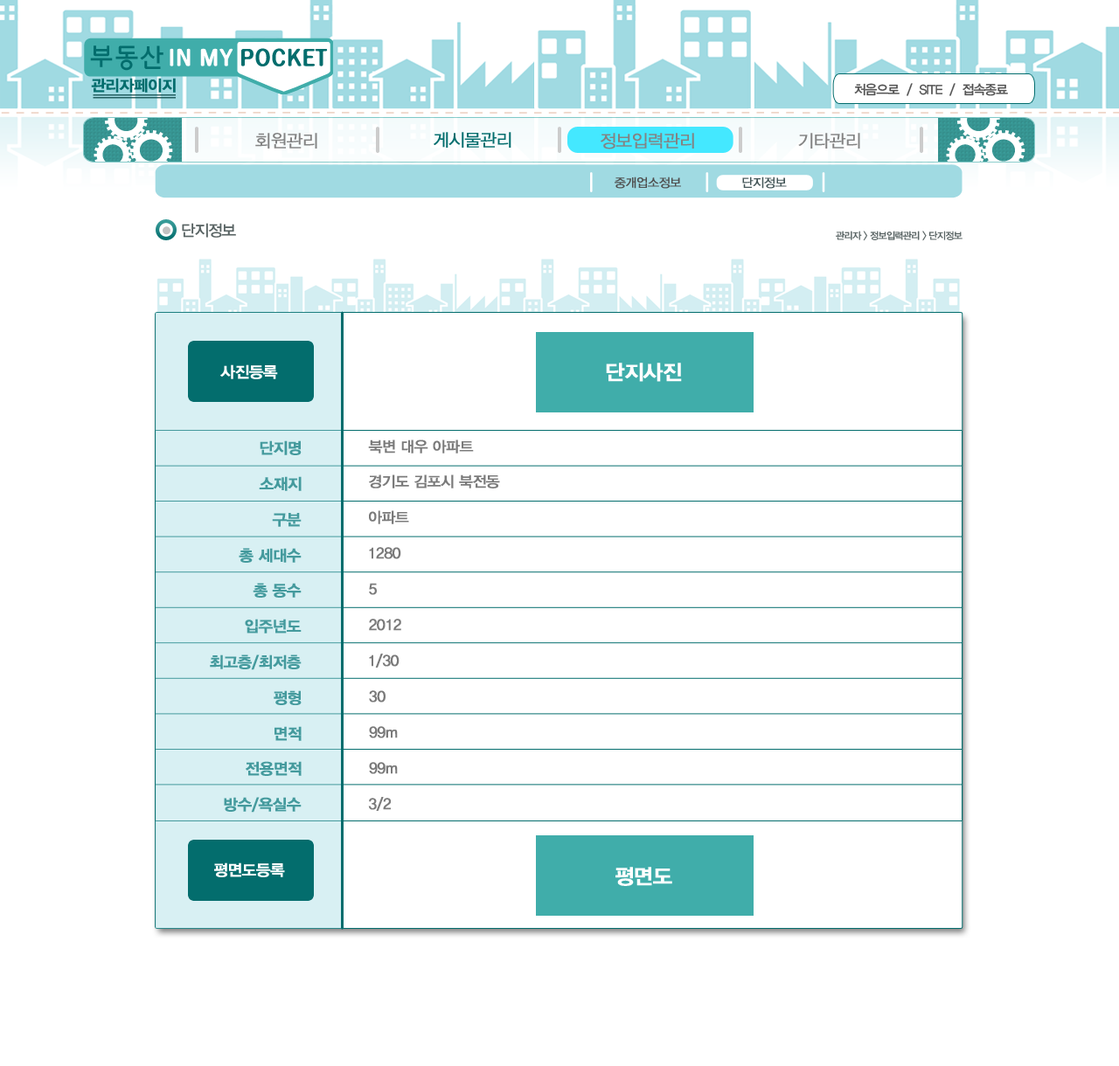
<style>
.page{position:relative;width:1119px;height:1066px;background:#ffffff}
.page>*{position:absolute;margin:0}
.t1{font:15.6px "YDIYGO340";letter-spacing:-0.04em;color:#036d6d;font-weight:bold}
.t2{font:13.1px "YDIYGO330";letter-spacing:-0.06em;color:#535353}
.t3{font:17.5px "YDIYGO320";letter-spacing:-0.04em;color:#838383;font-weight:bold}
.t4{font:17.5px "YDIYGO320";letter-spacing:-0.04em;color:#036d6d;font-weight:bold}
.t5{font:12.2px "YDIYGO320";letter-spacing:-0.04em;color:#4f4f4f;font-weight:bold}
.t6{font:12.2px "YDIYGO320";letter-spacing:-0.04em;color:#445658;font-weight:bold}
.t7{font:15.7px "YDIYGO330";letter-spacing:-0.06em;color:#576262}
.t8{font:9.6px "YDIYGO330";letter-spacing:-0.06em;color:#576262}
.t9{font:15.6px "YDIYGO340";letter-spacing:-0.04em;color:#ffffff;font-weight:bold}
.t10{font:21px "YDIYGO340";letter-spacing:-0.04em;color:#ffffff;font-weight:bold}
.t11{font:15.6px "YDIYGO340";letter-spacing:-0.04em;color:#449a9d;font-weight:bold}
.t12{font:14.9px "YDIYGO330";letter-spacing:-0.04em;color:#7a7a7a;font-weight:bold}
</style>
<div class="page">
<p class="t1" style="left:91px;top:78px;width:85px;height:15px">관리자페이지</p>
<p class="t2" style="left:854px;top:83px;width:154px;height:13px">처음으로  /  SITE  /  접속종료</p>
<p class="t3" style="left:255px;top:133px;width:62px;height:16px">회원관리</p>
<p class="t4" style="left:433px;top:132px;width:78px;height:16px">게시물관리</p>
<p class="t3" style="left:600px;top:133px;width:94px;height:16px">정보입력관리</p>
<p class="t3" style="left:798px;top:133px;width:62px;height:16px">기타관리</p>
<p class="t5" style="left:614px;top:177px;width:67px;height:12px">중개업소정보</p>
<p class="t6" style="left:742px;top:177px;width:44px;height:12px">단지정보</p>
<p class="t7" style="left:182px;top:223px;width:54px;height:15px">단지정보</p>
<p class="t8" style="left:835px;top:231px;width:127px;height:10px">관리자 &gt; 정보입력관리 &gt; 단지정보</p>
<p class="t9" style="left:220px;top:364px;width:58px;height:15px">사진등록</p>
<p class="t10" style="left:606px;top:363px;width:76px;height:19px">단지사진</p>
<p class="t11" style="left:260px;top:440px;width:41px;height:15px">단지명</p>
<p class="t12" style="left:368px;top:440px;width:106px;height:14px">북변 대우 아파트</p>
<p class="t11" style="left:259px;top:476px;width:42px;height:15px">소재지</p>
<p class="t12" style="left:369px;top:474px;width:131px;height:14px">경기도 김포시 북전동</p>
<p class="t11" style="left:272px;top:513px;width:29px;height:14px">구분</p>
<p class="t12" style="left:369px;top:510px;width:40px;height:14px">아파트</p>
<p class="t11" style="left:239px;top:548px;width:62px;height:15px">총 세대수</p>
<p class="t12" style="left:369px;top:547px;width:32px;height:12px">1280</p>
<p class="t11" style="left:253px;top:583px;width:48px;height:15px">총 동수</p>
<p class="t12" style="left:369px;top:583px;width:8px;height:12px">5</p>
<p class="t11" style="left:245px;top:619px;width:56px;height:15px">입주년도</p>
<p class="t12" style="left:369px;top:619px;width:32px;height:12px">2012</p>
<p class="t12" style="left:369px;top:654px;width:30px;height:14px">1/30</p>
<p class="t11" style="left:210px;top:655px;width:91px;height:15px">최고층/최저층</p>
<p class="t11" style="left:274px;top:690px;width:27px;height:15px">평형</p>
<p class="t12" style="left:369px;top:690px;width:16px;height:13px">30</p>
<p class="t11" style="left:274px;top:726px;width:27px;height:15px">면적</p>
<p class="t12" style="left:369px;top:726px;width:29px;height:12px">99m</p>
<p class="t11" style="left:246px;top:761px;width:55px;height:15px">전용면적</p>
<p class="t12" style="left:369px;top:762px;width:29px;height:12px">99m</p>
<p class="t11" style="left:224px;top:797px;width:77px;height:16px">방수/욕실수</p>
<p class="t12" style="left:368px;top:797px;width:23px;height:14px">3/2</p>
<p class="t9" style="left:214px;top:862px;width:71px;height:15px">평면도등록</p>
<p class="t10" style="left:615px;top:867px;width:57px;height:19px">평면도</p>
</div>
